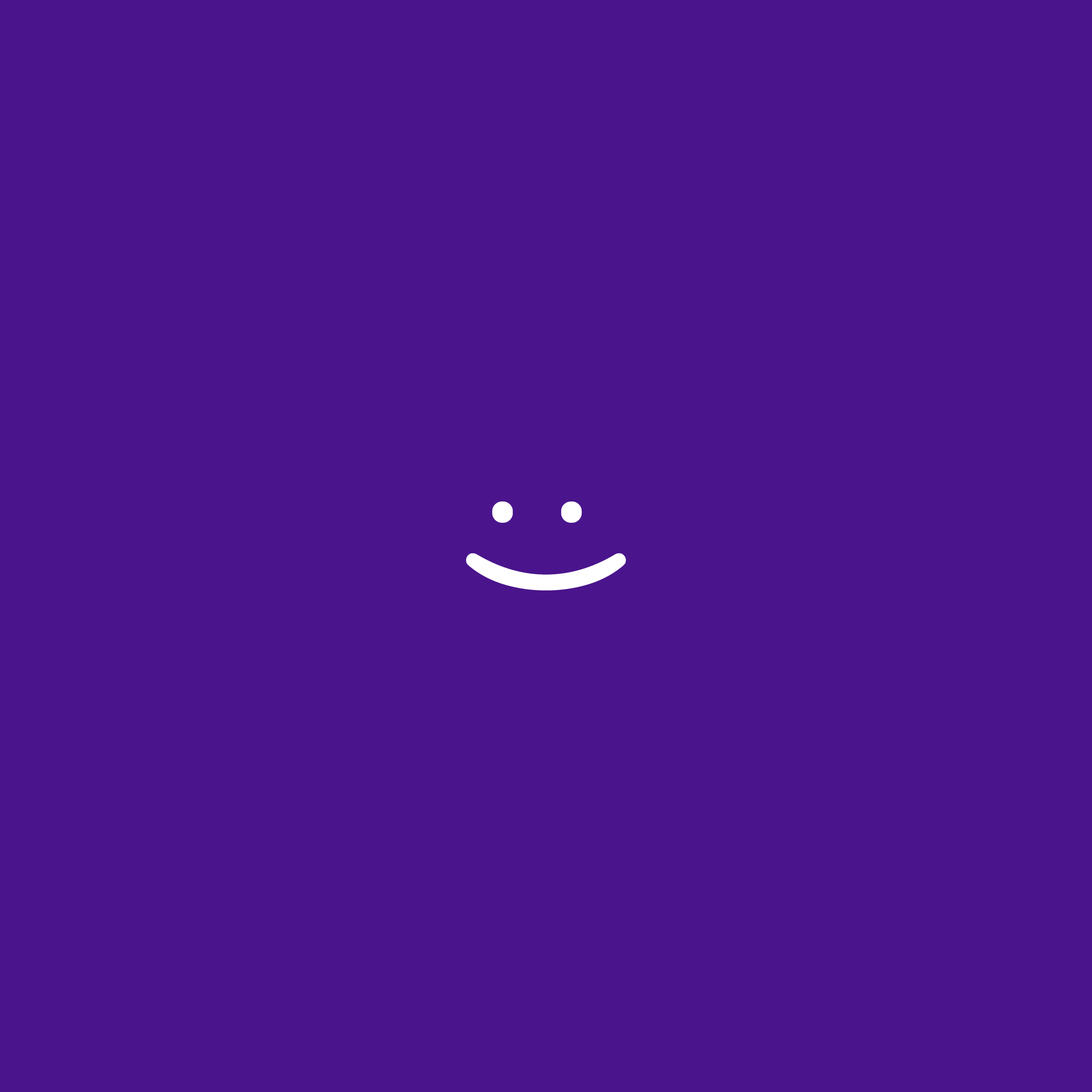
<style>
.page{position:relative;width:1092px;height:1092px;background:#4a148c}
.page>*{position:absolute;margin:0}
.t1{font:173.1px "VarelaRound-Regular";letter-spacing:0.06em;color:#ffffff;text-transform:uppercase}
</style>
<div class="page">
<p class="t1" style="left:466px;top:501px;width:160px;height:90px;rotate:90deg">:)</p>
</div>
